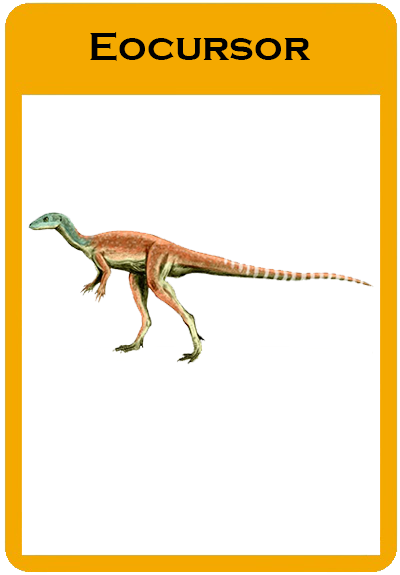
<style>
.page{position:relative;width:400px;height:575px;background:#ffffff}
.page>*{position:absolute;margin:0}
.t1{font:40px "CopperplateGothic-Bold";color:#000000}
</style>
<div class="page">
<p class="t1" style="left:90px;top:32px;width:220px;height:29px">Eocursor</p>
</div>
